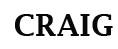
<style>
.page{position:relative;width:118px;height:49px;background:#ffffff}
.page>*{position:absolute;margin:0}
.t1{font:30px "LucidaFax-Demi";color:#090808}
</style>
<div class="page">
<p class="t1" style="left:15px;top:14px;width:98px;height:22px">CRAIG</p>
</div>
